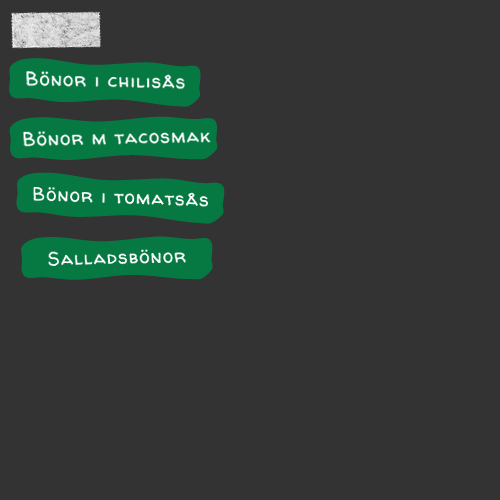
<style>
.page{position:relative;width:500px;height:500px;background:#333333}
.page>*{position:absolute;margin:0}
.t1{font:18.3px "WalterTurncoat";letter-spacing:0.08em;color:#ffffff}
</style>
<div class="page">
<p class="t1" style="left:26px;top:71px;width:159px;height:19px;rotate:1deg">Bönor i chilisås</p>
<p class="t1" style="left:23px;top:131px;width:188px;height:16px;rotate:-1deg">Bönor m tacosmak</p>
<p class="t1" style="left:33px;top:187px;width:175px;height:20px;rotate:2deg">Bönor i tomatsås</p>
<p class="t1" style="left:48px;top:249px;width:138px;height:17px;rotate:-1deg">Salladsbönor</p>
</div>
